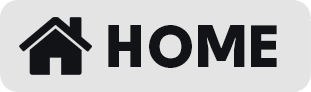
<style>
.page{position:relative;width:311px;height:92px;background:#e4e4e4}
.page>*{position:absolute;margin:0}
.t1{font:60px "Solomon-Sans-Black";letter-spacing:0.01em;color:#121316}
</style>
<div class="page">
<p class="t1" style="left:108px;top:25px;width:169px;height:43px">HOME</p>
</div>
